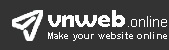
<style>
.page{position:relative;width:169px;height:50px;background:#333333}
.page>*{position:absolute;margin:0}
.t1{font:15px "ArialMT";color:#fefefe}
.t2{font:25px "BerlinSansFBDemi-Bold";color:#fefefe}
.t3{font:9px "Arial-BoldMT";letter-spacing:0.03em;color:#ffffff}
</style>
<div class="page">
<p class="t1" style="left:48px;top:10px;width:119px;height:17px"><span class="t2">vnweb</span>.online</p>
<p class="t3" style="left:48px;top:32px;width:119px;height:9px">Make your website online</p>
</div>
